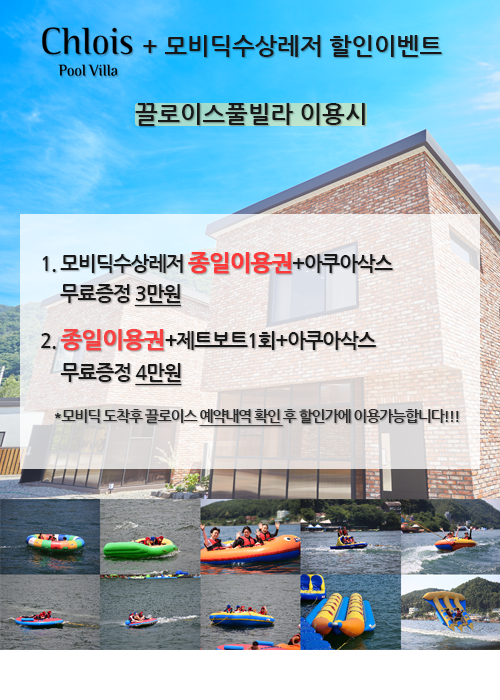
<style>
.page{position:relative;width:500px;height:700px}
.page>*{position:absolute;margin:0}
.t1{font:24px "NanumGothicBold";color:#181818}
.t2{font:15px/38.5px "NanumGothicBold";letter-spacing:-0.08em;color:#2b2b2b}
.t3{font:20px/38.5px "NanumGothicBold";letter-spacing:-0.06em;color:#181818}
.t4{font:20px/32.5px "NanumGothicBold";letter-spacing:-0.06em;color:#181818}
.t5{font:20px/28.5px "NanumGothicBold";letter-spacing:-0.06em;color:#181818}
.t6{font:23px/28.5px "NanumGothicBold";letter-spacing:-0.06em;color:#ff3939;font-weight:bold}
.t7{font:20px/44.5px "NanumGothicBold";letter-spacing:-0.06em;color:#181818}
.t8{font:20px/44.5px "NanumGothicBold";letter-spacing:-0.06em;color:#181818;text-decoration:underline}
.t9{font:20px/34.5px "NanumGothicBold";letter-spacing:-0.06em;color:#181818}
.t10{font:20px/22.5px "NanumGothicBold";letter-spacing:-0.06em;color:#181818}
.t11{font:23px/22.5px "NanumGothicBold";letter-spacing:-0.06em;color:#f94141;font-weight:bold}
.t12{font:20px/32.5px "NanumGothicBold";letter-spacing:-0.06em;color:#181818;text-decoration:underline}
.t13{font:20px/46.5px "NanumGothicBold";letter-spacing:-0.06em;color:#181818;text-decoration:underline}
.t14{font:15px/56.5px "NanumGothicBold";letter-spacing:-0.06em;color:#2b2b2b}
.t15{font:15px/52.5px "NanumGothicBold";letter-spacing:-0.08em;color:#2b2b2b}
.t16{font:15px/38.5px "NanumGothicBold";letter-spacing:-0.08em;color:#2b2b2b;text-decoration:underline}
</style>
<div class="page">
<p class="t1" style="left:143px;top:35px;width:299px;height:22px">+ 모비딕수상레저 할인이벤트</p>
<p class="t1" style="left:135px;top:103px;width:230px;height:23px">끌로이스풀빌라 이용시</p>
<p class="t2" style="left:41px;top:252px;width:418px;height:175px"><span class="t3"><br></span><span class="t4">1. </span><span class="t5">모비딕수상레저 </span><span class="t6">종일이용권</span><span class="t5">+아쿠아삭스<br>     </span><span class="t7">무료증정 </span><span class="t8">3만원<br></span><span class="t9">2</span><span class="t10">. </span><span class="t11">종일이용권</span><span class="t10">+제트보트1회+아쿠아삭스 <br>     </span><span class="t4">무료증정 </span><span class="t12">4</span><span class="t13">만원<br>    </span><span class="t14">*</span><span class="t15">모비딕 도착후 끌</span>로이스 <span class="t16">예약내역 확인 </span>후 할인가에 이용가능합니다!!!</p>
</div>
